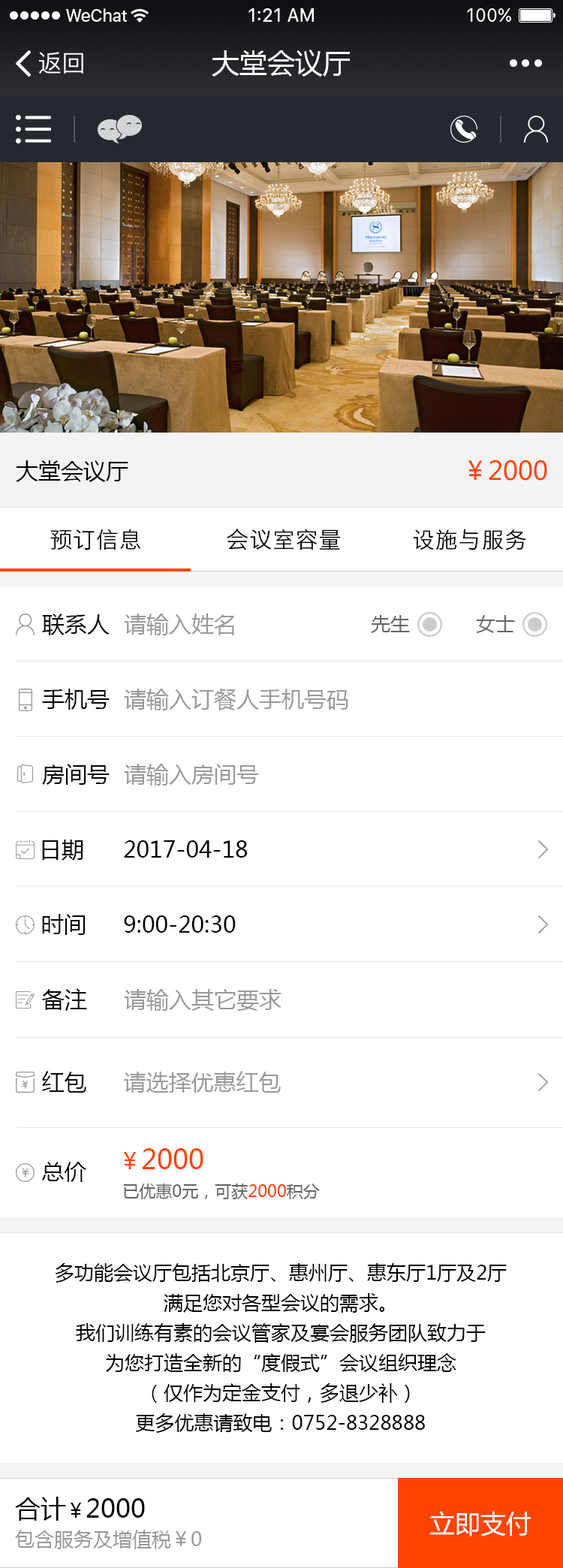
<style>
.page{position:relative;width:563px;height:1568px;background:#ffffff}
.page>*{position:absolute;margin:0}
.t1{font:24px "PingFangSC-Regular";color:#ffffff}
.t2{font:27.8px "MicrosoftYaHei";color:#ffffff}
.t3{font:22.5px "MicrosoftYaHei";color:#000000}
.t4{font:25.5px "MicrosoftYaHei";color:#ff4400}
.t5{font:22.5px "HiraginoSansGB-W3";letter-spacing:0.03em;color:#000000}
.t6{font:22.5px "MicrosoftYaHei";color:#999999}
.t7{font:19.5px "MicrosoftYaHei";color:#666666}
.t8{font:22.5px "MicrosoftYaHei";color:#0a0a0a}
.t9{font:27px "MicrosoftYaHei";color:#ff4400}
.t10{font:22.5px "MicrosoftYaHei";color:#ff4400}
.t11{font:16.5px "MicrosoftYaHei";color:#666666}
.t12{font:22.5px "MicrosoftYaHei";color:#ff6600}
.t13{font:16.5px "MicrosoftYaHei";color:#ff4400}
.t14{font:19.5px/30px "MicrosoftYaHei";color:#000000}
.t15{font:19.5px/33.8px "MicrosoftYaHei";color:#999999}
.t16{font:25.5px/33.8px "MicrosoftYaHei";color:#000000}
.t17{font:19.5px/33.8px "MicrosoftYaHei";color:#000000}
.t18{font:25.5px "MicrosoftYaHei";color:#ffffff}
</style>
<div class="page">
<p class="t1" style="left:39px;top:52px;width:44px;height:22px">返回</p>
<p class="t2" style="left:212px;top:50px;width:138px;height:27px">大堂会议厅</p>
<p class="t3" style="left:16px;top:460px;width:112px;height:22px">大堂会议厅</p>
<p class="t4" style="left:468px;top:460px;width:79px;height:21px">￥2000</p>
<p class="t5" style="left:50px;top:529px;width:90px;height:21px">预订信息</p>
<p class="t5" style="left:227px;top:529px;width:113px;height:21px">会议室容量</p>
<p class="t5" style="left:413px;top:529px;width:113px;height:21px">设施与服务</p>
<p class="t3" style="left:42px;top:614px;width:68px;height:21px">联系人</p>
<p class="t6" style="left:124px;top:614px;width:110px;height:21px">请输入姓名</p>
<p class="t7" style="left:371px;top:615px;width:39px;height:18px">先生</p>
<p class="t7" style="left:476px;top:615px;width:39px;height:18px">女士</p>
<p class="t3" style="left:42px;top:689px;width:68px;height:21px">手机号</p>
<p class="t6" style="left:124px;top:689px;width:224px;height:21px">请输入订餐人手机号码</p>
<p class="t3" style="left:42px;top:764px;width:68px;height:21px">房间号</p>
<p class="t6" style="left:124px;top:764px;width:135px;height:22px">请输入房间号</p>
<p class="t3" style="left:42px;top:840px;width:41px;height:21px">日期</p>
<p class="t3" style="left:124px;top:840px;width:124px;height:18px">2017-04-18</p>
<p class="t3" style="left:42px;top:914px;width:44px;height:21px">时间</p>
<p class="t3" style="left:124px;top:915px;width:112px;height:18px">9:00-20:30</p>
<p class="t3" style="left:42px;top:988px;width:45px;height:23px">备注</p>
<p class="t6" style="left:124px;top:989px;width:158px;height:22px">请输入其它要求</p>
<p class="t8" style="left:42px;top:1071px;width:44px;height:22px">红包</p>
<p class="t6" style="left:124px;top:1071px;width:157px;height:22px">请选择优惠红包</p>
<p class="t9" style="left:123px;top:1148px;width:81px;height:21px"><span class="t10">￥</span>2000</p>
<p class="t3" style="left:42px;top:1162px;width:44px;height:20px">总价</p>
<p class="t11" style="left:123px;top:1183px;width:197px;height:16px"><span class="t12"><br></span>已优惠0元，可获<span class="t13">2000</span>积分</p>
<p class="t14" style="left:55px;top:1263px;width:452px;height:170px;text-align:center">多功能会议厅包括北京厅、惠州厅、惠东厅1厅及2厅<br>满足您对各型会议的需求。<br>我们训练有素的会议管家及宴会服务团队致力于<br>为您打造全新的“度假式”会议组织理念<br>（仅作为定金支付，多退少补）<br>更多优惠请致电：0752-8328888</p>
<p class="t15" style="left:15px;top:1497px;width:187px;height:52px"><span class="t16">合计</span><span class="t17">￥</span><span class="t16">2000<br></span>包含服务及增值税￥0</p>
<p class="t18" style="left:430px;top:1511px;width:101px;height:25px">立即支付</p>
</div>
